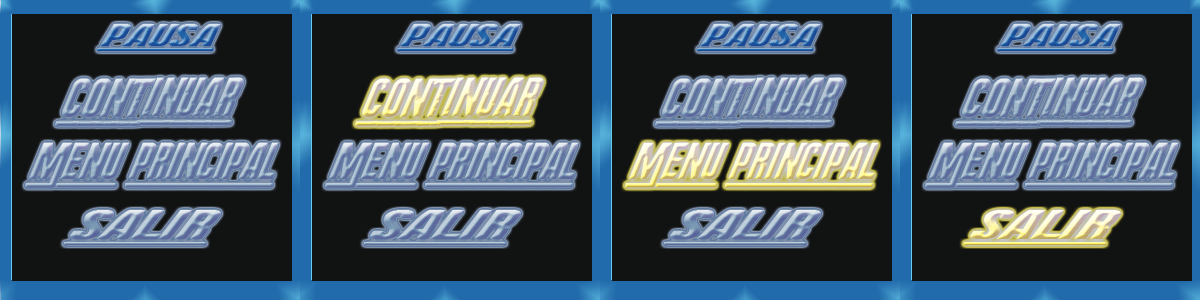
<style>
.page{position:relative;width:1200px;height:300px;background:#111212}
.page>*{position:absolute;margin:0}
.t1{font:31.1px "RadiumCorp";scale:2.03 1}
.t2{font:54.9px "RadiumCorp"}
.t3{font:51.8px "RadiumCorp";scale:0.97 1}
.t4{font:42.9px "RadiumCorp";scale:2.07 1}
</style>
<div class="page">
<p class="t1" style="left:97px;top:24px;width:124px;height:27px">pausa</p>
<p class="t1" style="left:397px;top:24px;width:124px;height:27px">pausa</p>
<p class="t1" style="left:697px;top:24px;width:124px;height:27px">pausa</p>
<p class="t1" style="left:997px;top:24px;width:124px;height:27px">pausa</p>
<p class="t2" style="left:55px;top:77px;width:189px;height:49px;rotate:-1deg">continuar</p>
<p class="t2" style="left:355px;top:77px;width:189px;height:49px;rotate:-1deg">continuar</p>
<p class="t2" style="left:655px;top:77px;width:189px;height:49px;rotate:-1deg">continuar</p>
<p class="t2" style="left:955px;top:77px;width:189px;height:49px;rotate:-1deg">continuar</p>
<p class="t3" style="left:25px;top:142px;width:254px;height:46px">menu principal</p>
<p class="t3" style="left:325px;top:142px;width:254px;height:46px">menu principal</p>
<p class="t3" style="left:625px;top:142px;width:254px;height:46px">menu principal</p>
<p class="t3" style="left:925px;top:142px;width:254px;height:46px">menu principal</p>
<p class="t4" style="left:63px;top:210px;width:158px;height:35px">salir</p>
<p class="t4" style="left:363px;top:210px;width:158px;height:35px">salir</p>
<p class="t4" style="left:663px;top:210px;width:158px;height:35px">salir</p>
<p class="t4" style="left:963px;top:210px;width:158px;height:35px">salir</p>
</div>
